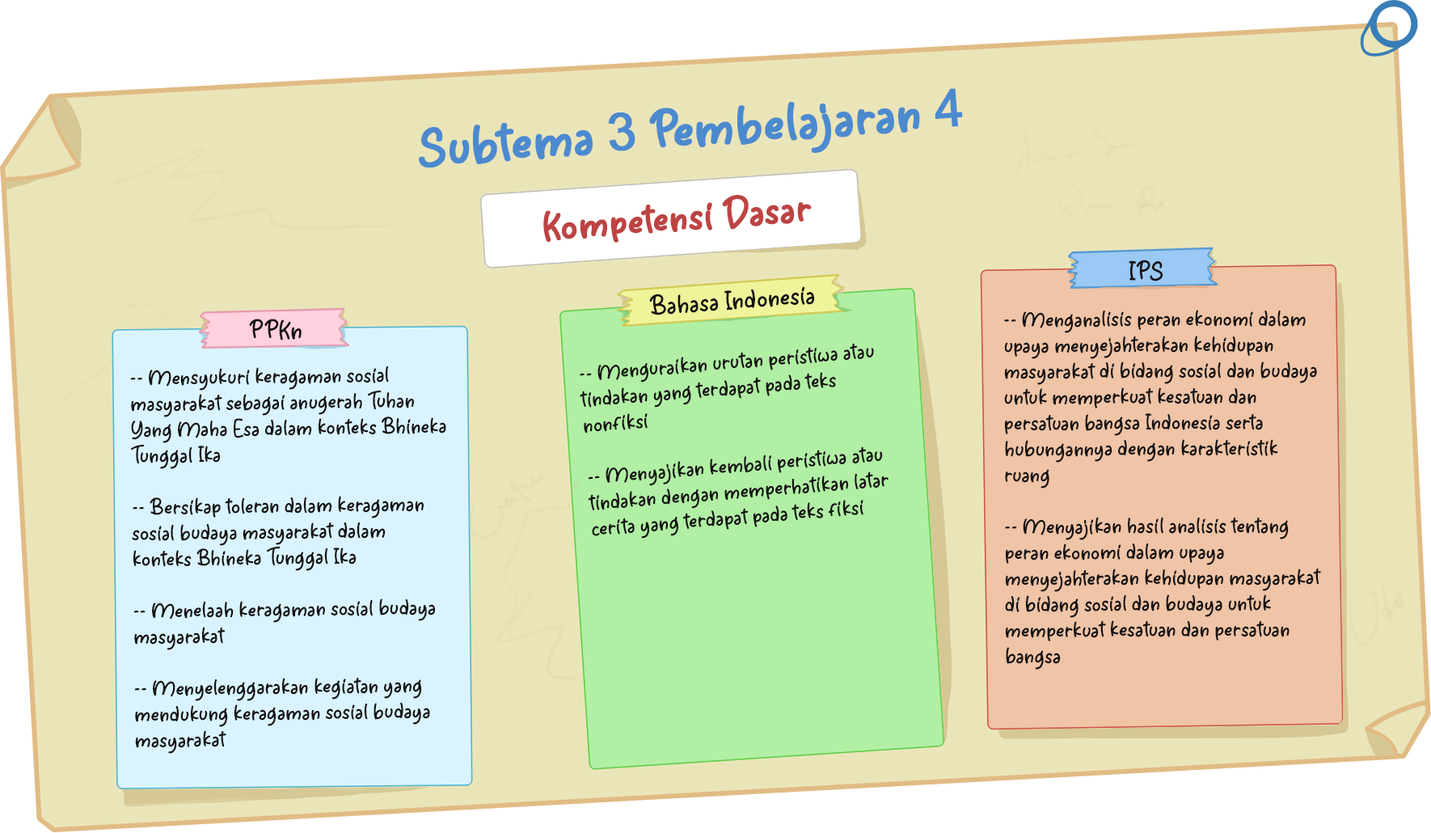
<style>
.page{position:relative;width:1431px;height:833px;background:#eae5b9}
.page>*{position:absolute;margin:0}
.t1{font:51.8px "Agfolan-Regular";color:#4c8acf;font-weight:bold}
.t2{font:51.8px "ArialMT";color:#4c8acf;font-weight:bold}
.t3{font:38.8px "Agfolan-Regular";color:#be4343;font-weight:bold}
.t4{font:25.9px "Agfolan-Regular";color:#151212}
.t5{font:21.6px "Agfolan-Regular";color:#151212}
</style>
<div class="page">
<p class="t1" style="left:419px;top:88px;width:544px;height:80px;rotate:-4deg">Subtema <span class="t2">3</span> Pembelajaran <span class="t2">4</span></p>
<p class="t3" style="left:543px;top:195px;width:269px;height:48px;rotate:-4deg">Kompetensi Dasar</p>
<p class="t4" style="left:1129px;top:260px;width:35px;height:21px;rotate:1deg">IPS</p>
<p class="t4" style="left:649px;top:286px;width:166px;height:29px;rotate:-4deg">Bahasa Indonesia</p>
<p class="t5" style="left:1004px;top:310px;width:317px;height:360px">-- Menganalisis peran ekonomi dalam upaya menyejahterakan kehidupan masyarakat di bidang sosial dan budaya untuk memperkuat kesatuan dan persatuan bangsa Indonesia serta hubungannya dengan karakteristik ruang<br><br>-- Menyajikan hasil analisis tentang peran ekonomi dalam upaya menyejahterakan kehidupan masyarakat di bidang sosial dan budaya untuk memperkuat kesatuan dan persatuan bangsa</p>
<p class="t4" style="left:249px;top:319px;width:53px;height:21px">PPKn</p>
<p class="t5" style="left:580px;top:343px;width:309px;height:196px;rotate:-5deg">-- Menguraikan urutan peristiwa atau tindakan yang terdapat pada teks nonfiksi<br><br>-- Menyajikan kembali peristiwa atau tindakan dengan memperhatikan latar cerita yang terdapat pada teks fiksi</p>
<p class="t5" style="left:130px;top:366px;width:316px;height:388px;rotate:-1deg">-- Mensyukuri keragaman sosial masyarakat sebagai anugerah Tuhan Yang Maha Esa dalam konteks Bhineka Tunggal Ika<br><br>-- Bersikap toleran dalam keragaman sosial budaya masyarakat dalam konteks Bhineka Tunggal Ika<br><br>-- Menelaah keragaman sosial budaya masyarakat<br><br>-- Menyelenggarakan kegiatan yang mendukung keragaman sosial budaya masyarakat</p>
</div>
